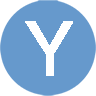
<style>
.page{position:relative;width:96px;height:96px;background:#6699cc}
.page>*{position:absolute;margin:0}
.t1{font:72.4px "SansSerif";letter-spacing:0.02em;color:#ffffff;font-weight:bold}
</style>
<div class="page">
<p class="t1" style="left:25px;top:21px;width:48px;height:55px">Y</p>
</div>
